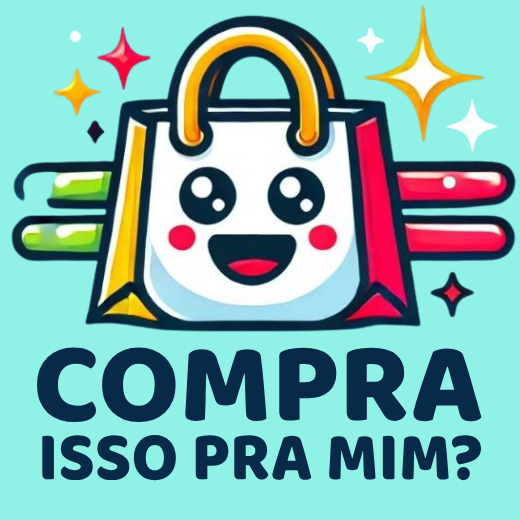
<style>
.page{position:relative;width:520px;height:520px;background:#90f1e7}
.page>*{position:absolute;margin:0}
.t1{font:116px "Baloo";color:#072a48}
.t2{font:70.2px "Baloo";color:#072a48;scale:0.94 1}
</style>
<div class="page">
<p class="t1" style="left:37px;top:347px;width:445px;height:76px">COMPRA</p>
<p class="t2" style="left:42px;top:435px;width:439px;height:46px">ISSO PRA MIM?</p>
</div>
